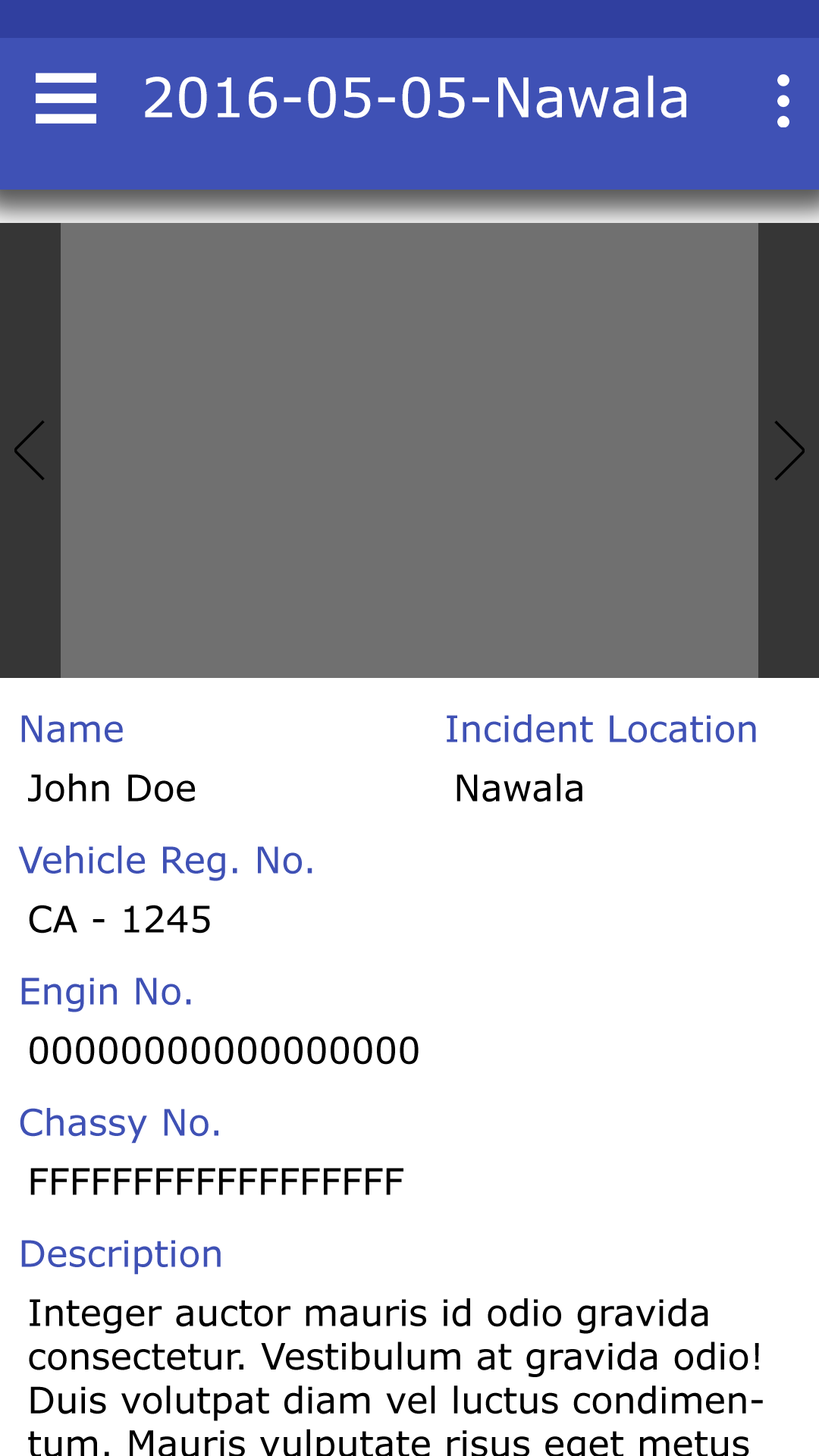
<style>
.page{position:relative;width:819px;height:1456px;background:#ffffff}
.page>*{position:absolute;margin:0}
.t1{font:54.6px "MSReferenceSansSerif";color:#ffffff}
.t2{font:36.4px "MSReferenceSansSerif";color:#3f51b5}
.t3{font:36.4px "MSReferenceSansSerif";color:#000000}
</style>
<div class="page">
<p class="t1" style="left:145px;top:75px;width:541px;height:43px">2016-05-05-Nawala</p>
<p class="t2" style="left:21px;top:715px;width:102px;height:28px">Name</p>
<p class="t2" style="left:447px;top:714px;width:309px;height:29px">Incident Location</p>
<p class="t3" style="left:28px;top:773px;width:167px;height:29px">John Doe</p>
<p class="t3" style="left:457px;top:773px;width:125px;height:29px">Nawala</p>
<p class="t2" style="left:18px;top:846px;width:294px;height:35px">Vehicle Reg. No.</p>
<p class="t3" style="left:29px;top:905px;width:181px;height:28px">CA - 1245</p>
<p class="t2" style="left:21px;top:977px;width:170px;height:35px">Engin No.</p>
<p class="t3" style="left:30px;top:1036px;width:389px;height:29px">00000000000000000</p>
<p class="t2" style="left:20px;top:1108px;width:198px;height:36px">Chassy No.</p>
<p class="t3" style="left:30px;top:1168px;width:373px;height:27px">FFFFFFFFFFFFFFFFFF</p>
<p class="t2" style="left:21px;top:1240px;width:200px;height:35px">Description</p>
</div>
